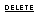
<style>
.page{position:relative;width:38px;height:14px;background:#ffffff}
.page>*{position:absolute;margin:0}
.t1{font:8px "Silkscreen";color:#000000}
</style>
<div class="page">
<p class="t1" style="left:5px;top:5px;width:28px;height:5px">delete</p>
</div>
